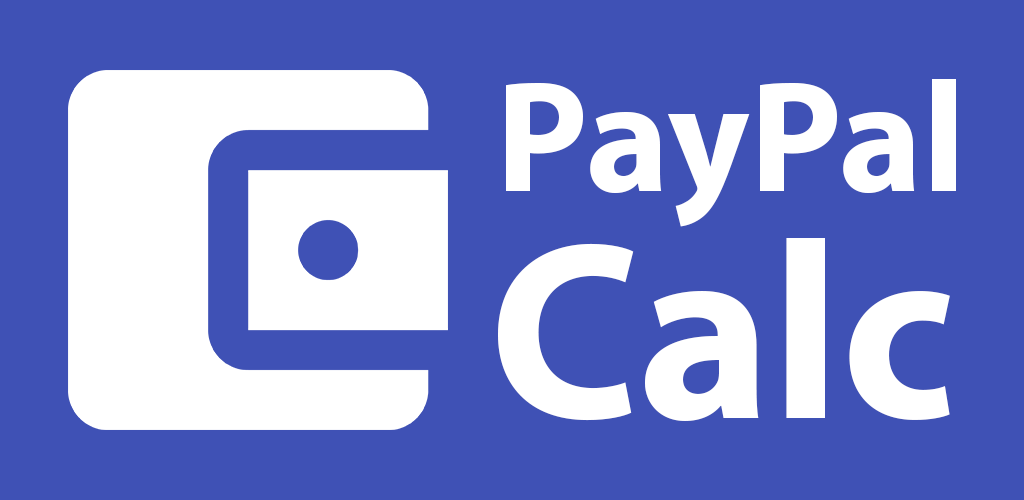
<style>
.page{position:relative;width:1024px;height:500px;background:#3f51b5}
.page>*{position:absolute;margin:0}
.t1{font:158.2px "MyriadPro-Bold";color:#ffffff}
.t2{font:253px "MyriadPro-Bold";color:#ffffff}
</style>
<div class="page">
<p class="t1" style="left:506px;top:79px;width:450px;height:148px">PayPal</p>
<p class="t2" style="left:498px;top:238px;width:452px;height:183px">Calc</p>
</div>
